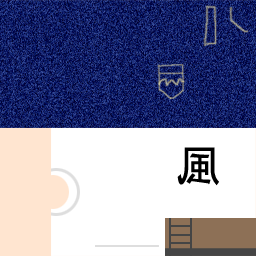
<style>
.page{position:relative;width:256px;height:256px;background:#ffffff}
.page>*{position:absolute;margin:0}
.t1{font:45.8px "MS-PGothic";color:#000000}
</style>
<div class="page">
<p class="t1" style="left:177px;top:147px;width:42px;height:39px;rotate:180deg">風</p>
</div>
